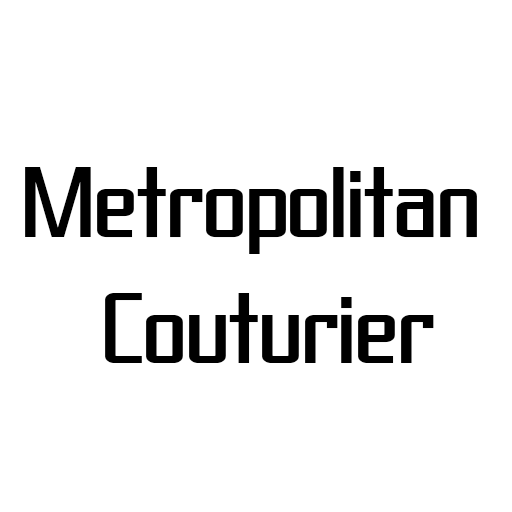
<style>
.page{position:relative;width:512px;height:512px;background:#ffffff}
.page>*{position:absolute;margin:0}
.t1{font:105px "SFProverbialGothic";color:#000000}
</style>
<div class="page">
<p class="t1" style="left:25px;top:167px;width:452px;height:196px;text-align:center">Metropolitan <br>Couturier</p>
</div>
